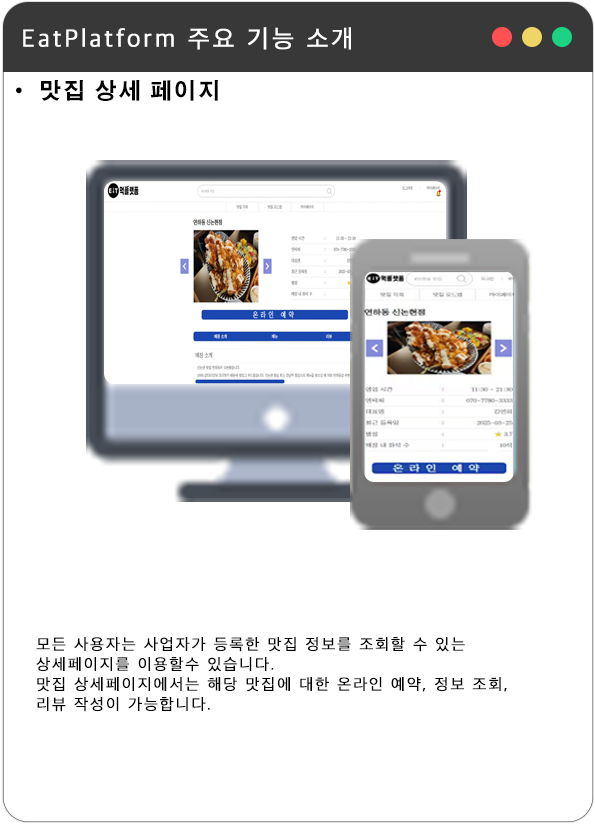
<style>
.page{position:relative;width:595px;height:825px;background:#ffffff}
.page>*{position:absolute;margin:0}
.t1{font:25px "AppleSDGothicNeoL00";letter-spacing:0.1em;color:#ffffff;font-weight:bold}
.t2{font:25px "AppleSDGothicNeoL00";letter-spacing:0.1em;color:#ffffff;font-variant:small-caps;font-weight:bold}
.t3{font:22px "AdobeGothicStd-Bold";letter-spacing:0.1em;color:#000000}
.t4{font:16px/20px "AppleSDGothicNeoL00";letter-spacing:0.1em;color:#000000;font-weight:bold}
</style>
<div class="page">
<p class="t1" style="left:23px;top:27px;width:328px;height:23px"><span class="t2">E</span>atPlatform 주요 기능 소개</p>
<p class="t3" style="left:16px;top:80px;width:202px;height:21px">· 맛집 상세 페이지</p>
<p class="t4" style="left:36px;top:637px;width:471px;height:75px">모든 사용자는 사업자가 등록한 맛집 정보를 조회할 수 있는<br>상세페이지를 이용할수 있습니다.<br>맛집 상세페이지에서는 해당 맛집에 대한 온라인 예약, 정보 조회,<br>리뷰 작성이 가능합니다.</p>
</div>
